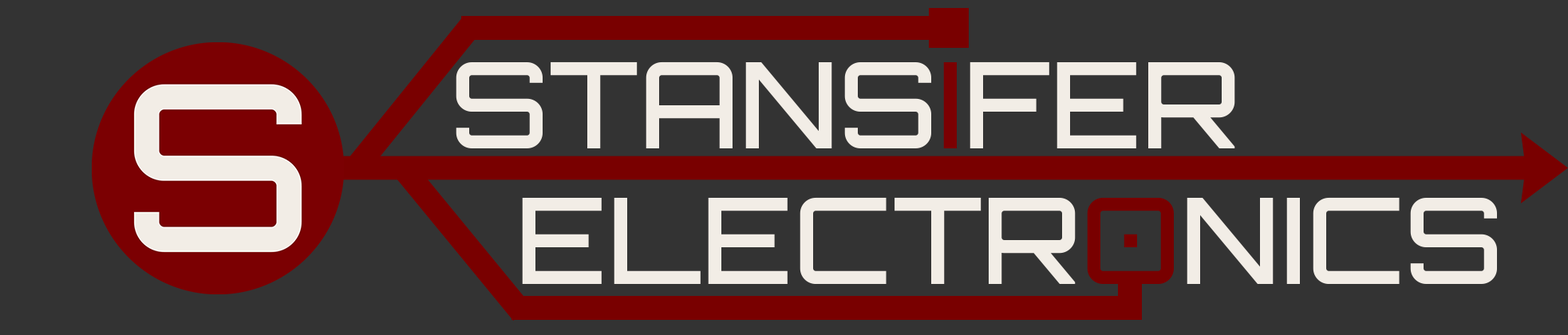
<style>
.page{position:relative;width:1568px;height:335px;background:#333333}
.page>*{position:absolute;margin:0}
.t1{font:119.7px "Orbitron-Medium";color:#f2ede6}
.t2{font:119.7px "Orbitron-Medium";color:#7b0002}
.t3{font:119.7px "Orbitron-Medium";color:#790000}
</style>
<div class="page">
<p class="t1" style="left:456px;top:61px;width:779px;height:87px">STANS<span class="t2">I</span>FER</p>
<p class="t1" style="left:522px;top:197px;width:975px;height:87px">ELECTR<span class="t3">O</span>NICS</p>
</div>
